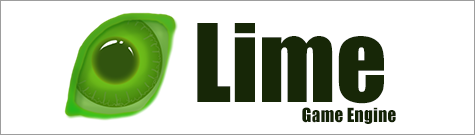
<style>
.page{position:relative;width:475px;height:135px;background:#ffffff}
.page>*{position:absolute;margin:0}
.t1{font:100px "Impact";color:#172707}
.t2{font:18px "Impact";color:#132105}
</style>
<div class="page">
<p class="t1" style="left:197px;top:23px;width:187px;height:81px">Lime</p>
<p class="t2" style="left:302px;top:107px;width:94px;height:17px">Game Engine</p>
</div>
